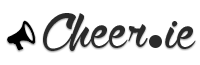
<style>
.page{position:relative;width:200px;height:65px;background:#ffffff}
.page>*{position:absolute;margin:0}
.t1{font:78px "WolfintheCity";letter-spacing:0.02em;color:#2a2a2a}
</style>
<div class="page">
<p class="t1" style="left:43px;top:13px;width:105px;height:38px">Cheer</p>
<p class="t1" style="left:165px;top:21px;width:31px;height:28px">ie</p>
</div>
